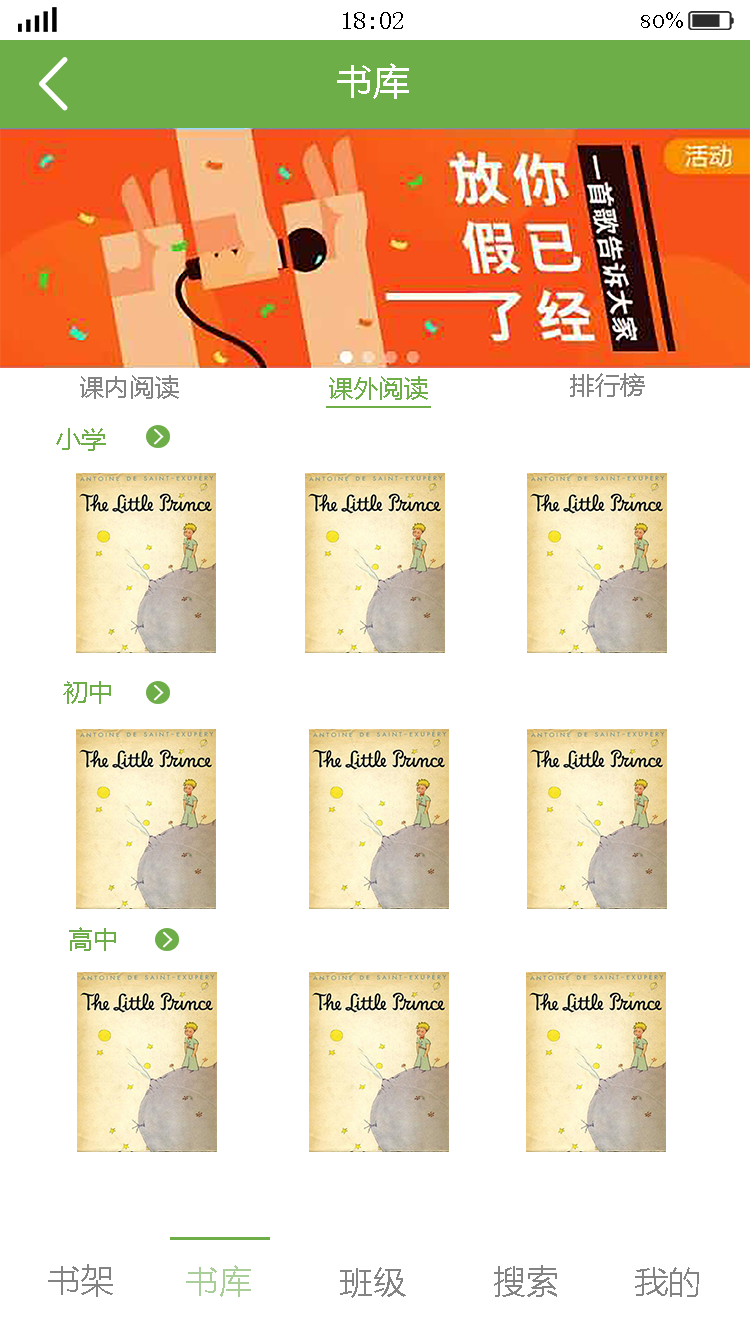
<style>
.page{position:relative;width:750px;height:1334px;background:#ffffff}
.page>*{position:absolute;margin:0}
.t1{font:25px "SimSun";color:#000000}
.t2{font:25px "BellMT";color:#000000}
.t3{font:37.5px "MicrosoftYaHei";color:#ffffff}
.t4{font:25px "MicrosoftYaHei";color:#838383}
.t5{font:25px "MicrosoftYaHei";color:#6dae49}
.t6{font:33.3px "MicrosoftYaHei";color:#838383}
.t7{font:33.3px "MicrosoftYaHei";color:#aace9a}
</style>
<div class="page">
<p class="t1" style="left:343px;top:12px;width:60px;height:17px">18:02</p>
<p class="t2" style="left:641px;top:12px;width:42px;height:16px">80%</p>
<p class="t3" style="left:337px;top:63px;width:72px;height:36px">书库</p>
<p class="t4" style="left:80px;top:375px;width:99px;height:24px">课内阅读</p>
<p class="t5" style="left:329px;top:376px;width:99px;height:24px">课外阅读</p>
<p class="t4" style="left:570px;top:373px;width:75px;height:24px">排行榜</p>
<p class="t5" style="left:56px;top:428px;width:50px;height:23px">小学</p>
<p class="t5" style="left:63px;top:681px;width:48px;height:23px">初中</p>
<p class="t5" style="left:69px;top:927px;width:47px;height:24px">高中</p>
<p class="t6" style="left:48px;top:1264px;width:65px;height:33px">书架</p>
<p class="t7" style="left:186px;top:1265px;width:65px;height:32px">书库</p>
<p class="t6" style="left:494px;top:1265px;width:63px;height:32px">搜索</p>
<p class="t6" style="left:340px;top:1267px;width:66px;height:31px">班级</p>
<p class="t6" style="left:635px;top:1267px;width:64px;height:30px">我的</p>
</div>
